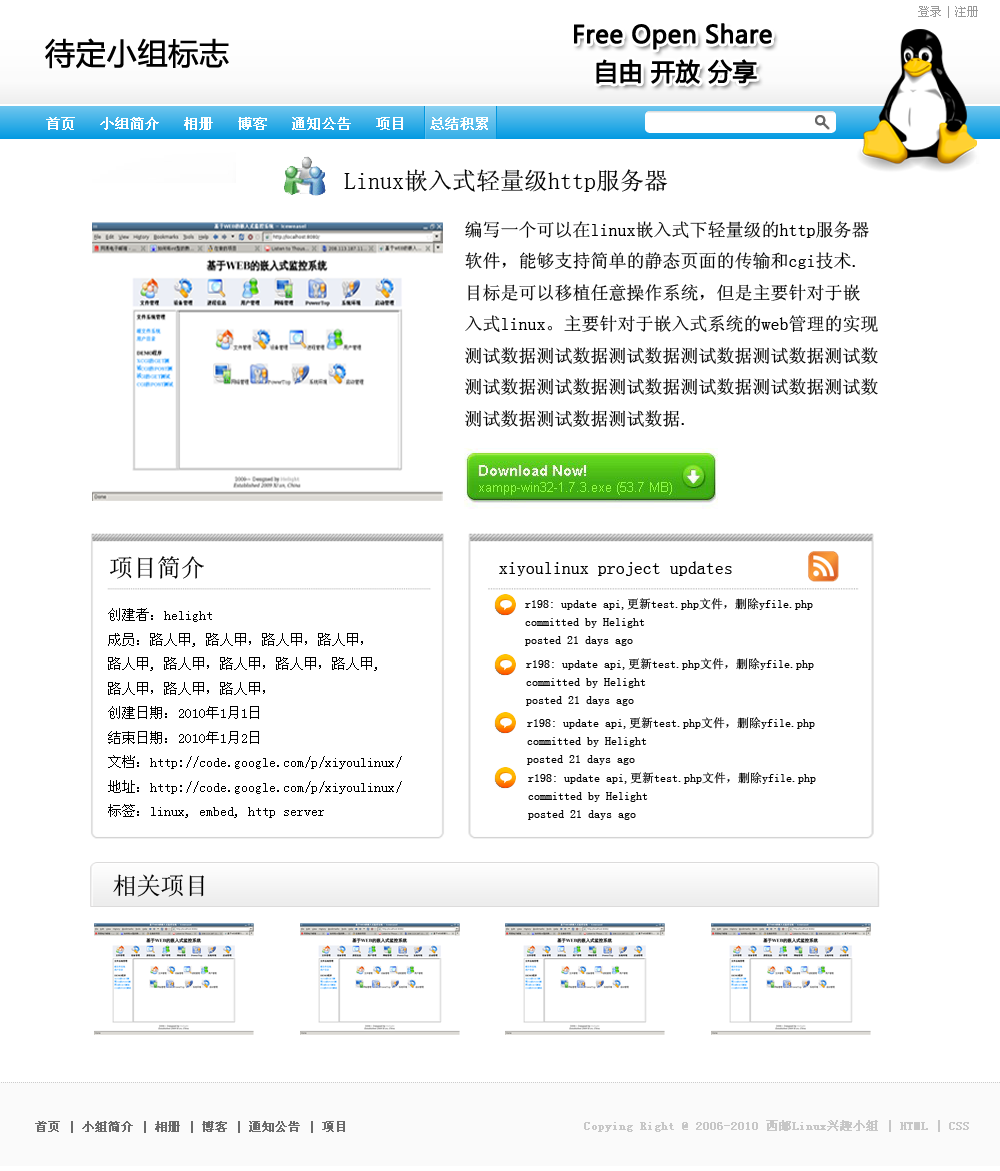
<style>
.page{position:relative;width:1000px;height:1171px;background:#ffffff}
.page>*{position:absolute;margin:0}
.t1{font:24px "SimSun";color:#000000}
.t2{font:18px "SimSun";color:#000000}
.t3{font:12px/18px "SimSun";color:#000000}
.t4{font:14px "SimSun";color:#000000}
</style>
<div class="page">
<p class="t1" style="left:344px;top:169px;width:324px;height:23px">Linux嵌入式轻量级http服务器</p>
<p class="t2" style="left:465px;top:221px;width:413px;height:206px">编写一个可以在linux嵌入式下轻量级的http服务器<br>软件，能够支持简单的静态页面的传输和cgi技术.<br>目标是可以移植任意操作系统，但是主要针对于嵌<br>入式linux。主要针对于嵌入式系统的web管理的实现<br>测试数据测试数据测试数据测试数据测试数据测试数<br>测试数据测试数据测试数据测试数据测试数据测试数<br>测试数据测试数据测试数据.</p>
<p class="t1" style="left:110px;top:556px;width:94px;height:23px">项目简介</p>
<p class="t2" style="left:499px;top:561px;width:233px;height:15px">xiyoulinux project updates</p>
<p class="t3" style="left:525px;top:598px;width:288px;height:48px">r198: update api,更新test.php文件，删除yfile.php<br>committed by Helight<br>posted 21 days ago</p>
<p class="t4" style="left:108px;top:608px;width:294px;height:210px">创建者：helight<br>成员：路人甲, 路人甲，路人甲，路人甲，<br>路人甲, 路人甲，路人甲，路人甲，路人甲, <br>路人甲，路人甲，路人甲，<br>创建日期：2010年1月1日<br>结束日期：2010年1月2日<br>文档：http://code.google.com/p/xiyoulinux/<br>地址：http://code.google.com/p/xiyoulinux/<br>标签：linux, embed, http server</p>
<p class="t3" style="left:526px;top:658px;width:288px;height:48px">r198: update api,更新test.php文件，删除yfile.php<br>committed by Helight<br>posted 21 days ago</p>
<p class="t3" style="left:527px;top:717px;width:288px;height:48px">r198: update api,更新test.php文件，删除yfile.php<br>committed by Helight<br>posted 21 days ago</p>
<p class="t3" style="left:528px;top:772px;width:288px;height:48px">r198: update api,更新test.php文件，删除yfile.php<br>committed by Helight<br>posted 21 days ago</p>
<p class="t1" style="left:113px;top:874px;width:91px;height:23px">相关项目</p>
</div>
